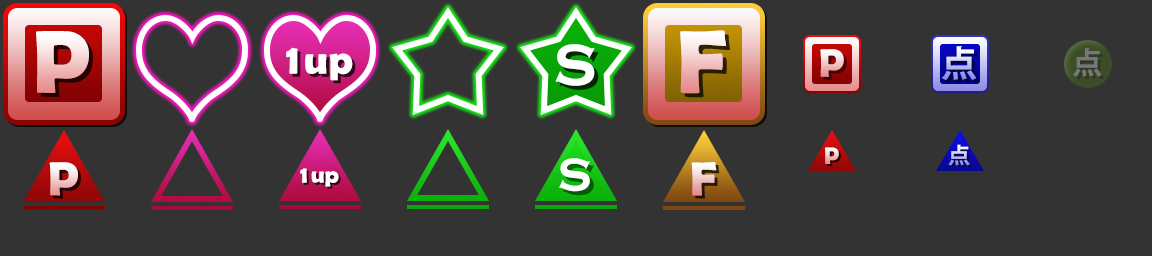
<style>
.page{position:relative;width:1152px;height:256px;background:#333333}
.page>*{position:absolute;margin:0}
.t1{font:90px "BerlinSansFBDemi-Bold"}
.t2{font:42px "BerlinSansFBDemi-Bold";color:#ffffff}
.t3{font:60px "CopperplateGothic-Bold";color:#ffffff}
.t4{font:40px "BerlinSansFBDemi-Bold"}
.t5{font:36px "KozGoPr6N-Bold"}
.t6{font:30px "KozGoPr6N-Bold";color:#777777}
.t7{font:24px "BerlinSansFBDemi-Bold"}
.t8{font:22px "KozGoPr6N-Bold"}
.t9{font:48px "CopperplateGothic-Bold";color:#ffffff}
.t10{font:48px "BerlinSansFBDemi-Bold"}
.t11{font:24px "BerlinSansFBDemi-Bold";color:#ffffff}
</style>
<div class="page">
<p class="t1" style="left:680px;top:30px;width:46px;height:64px">F</p>
<p class="t1" style="left:36px;top:31px;width:53px;height:62px">P</p>
<p class="t2" style="left:286px;top:47px;width:67px;height:34px">1 up</p>
<p class="t3" style="left:555px;top:44px;width:40px;height:42px">S</p>
<p class="t4" style="left:820px;top:49px;width:24px;height:28px">P</p>
<p class="t5" style="left:941px;top:46px;width:36px;height:34px">点</p>
<p class="t6" style="left:1073px;top:48px;width:29px;height:29px">点</p>
<p class="t7" style="left:825px;top:147px;width:14px;height:17px">P</p>
<p class="t8" style="left:948px;top:144px;width:22px;height:22px">点</p>
<p class="t9" style="left:559px;top:158px;width:31px;height:34px">S</p>
<p class="t10" style="left:49px;top:162px;width:29px;height:34px">P</p>
<p class="t11" style="left:300px;top:168px;width:39px;height:19px">1 up</p>
<p class="t10" style="left:691px;top:162px;width:26px;height:34px">F</p>
</div>
